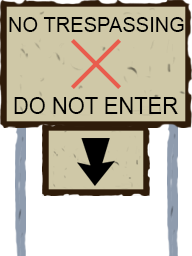
<style>
.page{position:relative;width:192px;height:256px;background:#cfc8a7}
.page>*{position:absolute;margin:0}
.t1{font:20.3px "ArialMT";color:#000000}
.t2{font:22.8px "ArialMT";color:#000000;scale:0.96 1}
</style>
<div class="page">
<p class="t1" style="left:9px;top:17px;width:175px;height:15px">NO TRESPASSING</p>
<p class="t2" style="left:14px;top:97px;width:164px;height:17px">DO NOT ENTER</p>
</div>
